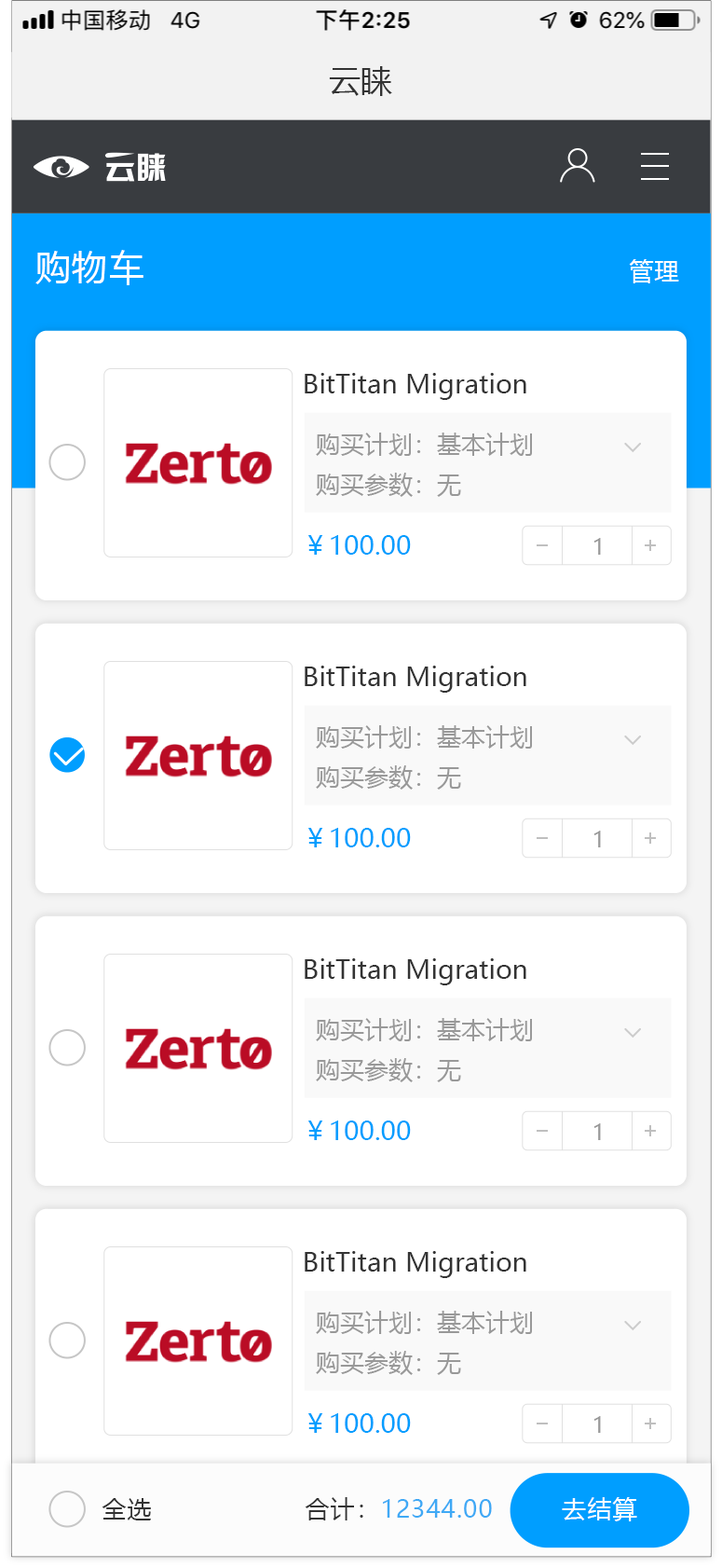
<style>
.page{position:relative;width:722px;height:1568px;background:#ffffff}
.page>*{position:absolute;margin:0}
.t1{font:31.7px "MicrosoftYaHei";color:#333333}
.t2{font:35.4px "MicrosoftYaHei";letter-spacing:0.04em;color:#ffffff}
.t3{font:24.2px "MicrosoftYaHei";letter-spacing:0.04em;color:#ffffff}
.t4{font:26.1px "MicrosoftYaHei";color:#333333}
.t5{font:24.2px "MicrosoftYaHei";color:#999999}
.t6{font:26.1px "MicrosoftYaHei";color:#009eff}
.t7{font:22.4px "MicrosoftYaHei";color:#999999}
.t8{font:24.2px "MicrosoftYaHei";letter-spacing:0.04em;color:#333333}
.t9{font:24.2px "MicrosoftYaHei";letter-spacing:0.04em;color:#3fa9f5}
</style>
<div class="page">
<p class="t1" style="left:329px;top:66px;width:63px;height:30px">云睐</p>
<p class="t2" style="left:35px;top:250px;width:109px;height:35px">购物车</p>
<p class="t3" style="left:629px;top:259px;width:51px;height:24px">管理</p>
<p class="t4" style="left:305px;top:373px;width:222px;height:27px">BitTitan Migration</p>
<p class="t5" style="left:316px;top:433px;width:216px;height:23px">购买计划：基本计划</p>
<p class="t5" style="left:316px;top:473px;width:145px;height:24px">购买参数：无</p>
<p class="t6" style="left:308px;top:535px;width:103px;height:20px">￥100.00</p>
<p class="t7" style="left:595px;top:538px;width:6px;height:17px">1</p>
<p class="t4" style="left:305px;top:666px;width:222px;height:27px">BitTitan Migration</p>
<p class="t5" style="left:316px;top:725px;width:216px;height:24px">购买计划：基本计划</p>
<p class="t5" style="left:316px;top:765px;width:145px;height:25px">购买参数：无</p>
<p class="t6" style="left:308px;top:828px;width:103px;height:19px">￥100.00</p>
<p class="t7" style="left:595px;top:831px;width:6px;height:16px">1</p>
<p class="t4" style="left:305px;top:958px;width:222px;height:27px">BitTitan Migration</p>
<p class="t5" style="left:316px;top:1018px;width:216px;height:23px">购买计划：基本计划</p>
<p class="t5" style="left:316px;top:1058px;width:145px;height:24px">购买参数：无</p>
<p class="t6" style="left:308px;top:1121px;width:103px;height:19px">￥100.00</p>
<p class="t7" style="left:595px;top:1123px;width:6px;height:17px">1</p>
<p class="t4" style="left:305px;top:1251px;width:222px;height:27px">BitTitan Migration</p>
<p class="t5" style="left:316px;top:1311px;width:216px;height:23px">购买计划：基本计划</p>
<p class="t5" style="left:316px;top:1351px;width:145px;height:24px">购买参数：无</p>
<p class="t6" style="left:308px;top:1413px;width:103px;height:20px">￥100.00</p>
<p class="t7" style="left:595px;top:1416px;width:6px;height:17px">1</p>
<p class="t8" style="left:102px;top:1498px;width:49px;height:22px">全选</p>
<p class="t9" style="left:305px;top:1497px;width:187px;height:23px"><span class="t8">合计：</span>12344.00</p>
<p class="t3" style="left:562px;top:1497px;width:76px;height:24px">去结算</p>
</div>
